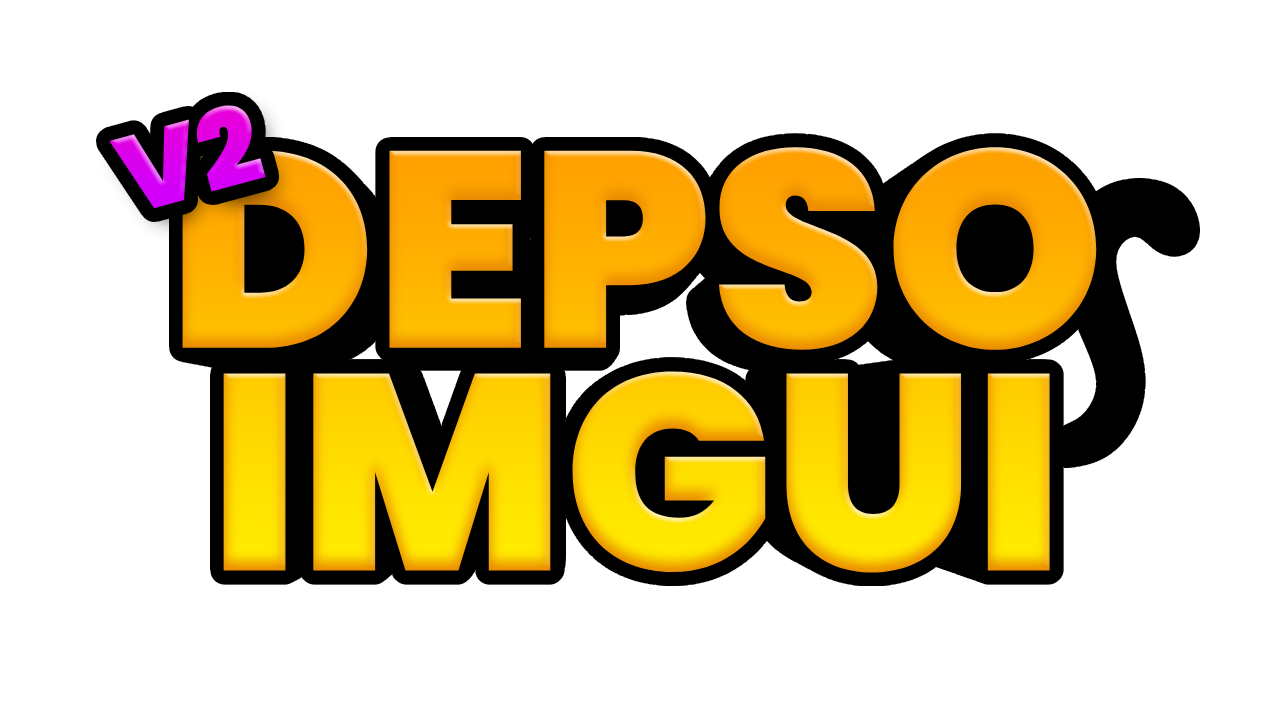
<style>
.page{position:relative;width:1280px;height:720px;background:#ffffff}
.page>*{position:absolute;margin:0}
.t1{font:108.1px "Poppins-Black";color:#dc00ee}
.t2{font:278.5px "Poppins-Black"}
</style>
<div class="page">
<p class="t1" style="left:109px;top:105px;width:157px;height:104px;rotate:-15deg">V2</p>
<p class="t2" style="left:182px;top:147px;width:915px;height:426px;text-align:center">DEPSO<br>IMGUI</p>
</div>
